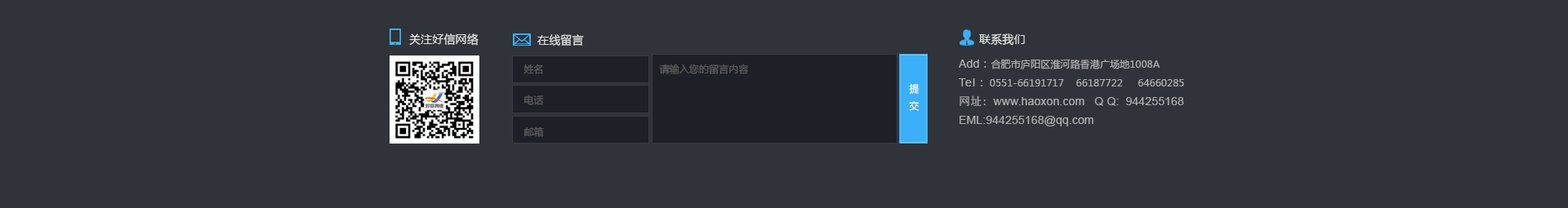
<style>
.page{position:relative;width:1568px;height:208px;background:#30333a}
.page>*{position:absolute;margin:0}
.t1{font:11.4px "MicrosoftYaHei";letter-spacing:0.01em;color:#e0e0e1}
.t2{font:9.9px/31.3px "MicrosoftYaHei";letter-spacing:0.01em;color:#5d5d5d}
.t3{font:9.8px "MicrosoftYaHei";letter-spacing:0.01em;color:#5d5d5d}
.t4{font:11.4px/18.8px "ArialMT";letter-spacing:0.01em;color:#adadaf}
.t5{font:11.4px/18.8px "MicrosoftYaHei";letter-spacing:0.01em;color:#adadaf}
.t6{font:9.8px/18.8px "MicrosoftYaHei";letter-spacing:0.01em;color:#adadaf}
.t7{font:11.4px/18.8px "ArialMT";letter-spacing:0.08em;color:#adadaf}
.t8{font:11.4px/18.8px "SimSun";letter-spacing:0.01em;color:#adadaf}
.t9{font:9.8px "MicrosoftYaHei";letter-spacing:0.01em;color:#ffffff}
</style>
<div class="page">
<p class="t1" style="left:409px;top:33px;width:70px;height:13px">关注好信网络</p>
<p class="t1" style="left:537px;top:34px;width:47px;height:12px">在线留言</p>
<p class="t1" style="left:979px;top:33px;width:46px;height:13px">联系我们</p>
<p class="t2" style="left:523px;top:64px;width:21px;height:73px">姓名<br>电话<br>邮箱</p>
<p class="t3" style="left:659px;top:64px;width:90px;height:10px">请输入您的留言内容</p>
<p class="t4" style="left:959px;top:59px;width:225px;height:68px">Add<span class="t5">：</span><span class="t6">合肥市庐阳区淮河路香港广场地1008A<br></span><span class="t7">Tel </span><span class="t5">: </span><span class="t6"> 0551-66191717    66187722     64660285<br></span><span class="t8">网址: </span>www.haoxon.com   Q Q:  944255168<br>EML:944255168@qq.com</p>
<p class="t9" style="left:909px;top:83px;width:11px;height:28px">提<br>交</p>
</div>
